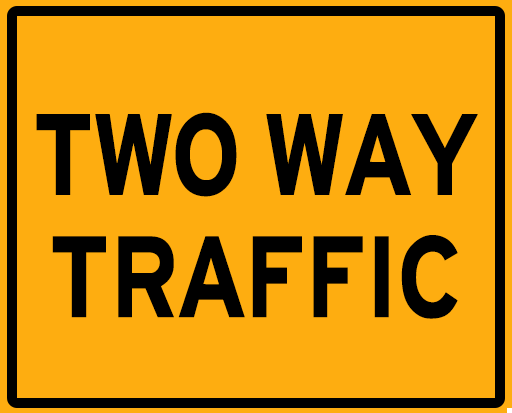
<style>
.page{position:relative;width:512px;height:413px;background:#fead10}
.page>*{position:absolute;margin:0}
.t1{font:122.2px/122.2px "HittheRoad";color:#000000;scale:0.85 1}
</style>
<div class="page">
<p class="t1" style="left:36px;top:112px;width:442px;height:207px;text-align:center">TWO WAY<br>TRAFFIC</p>
</div>
